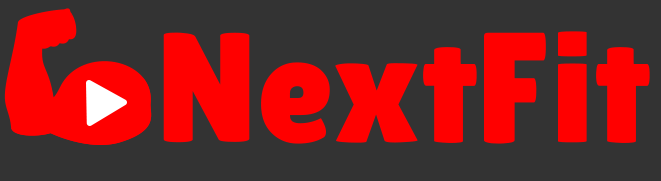
<style>
.page{position:relative;width:661px;height:181px;background:#333333}
.page>*{position:absolute;margin:0}
.t1{font:156px "LilitaOne";color:#ff0000}
</style>
<div class="page">
<p class="t1" style="left:163px;top:31px;width:487px;height:113px">NextFit</p>
</div>
